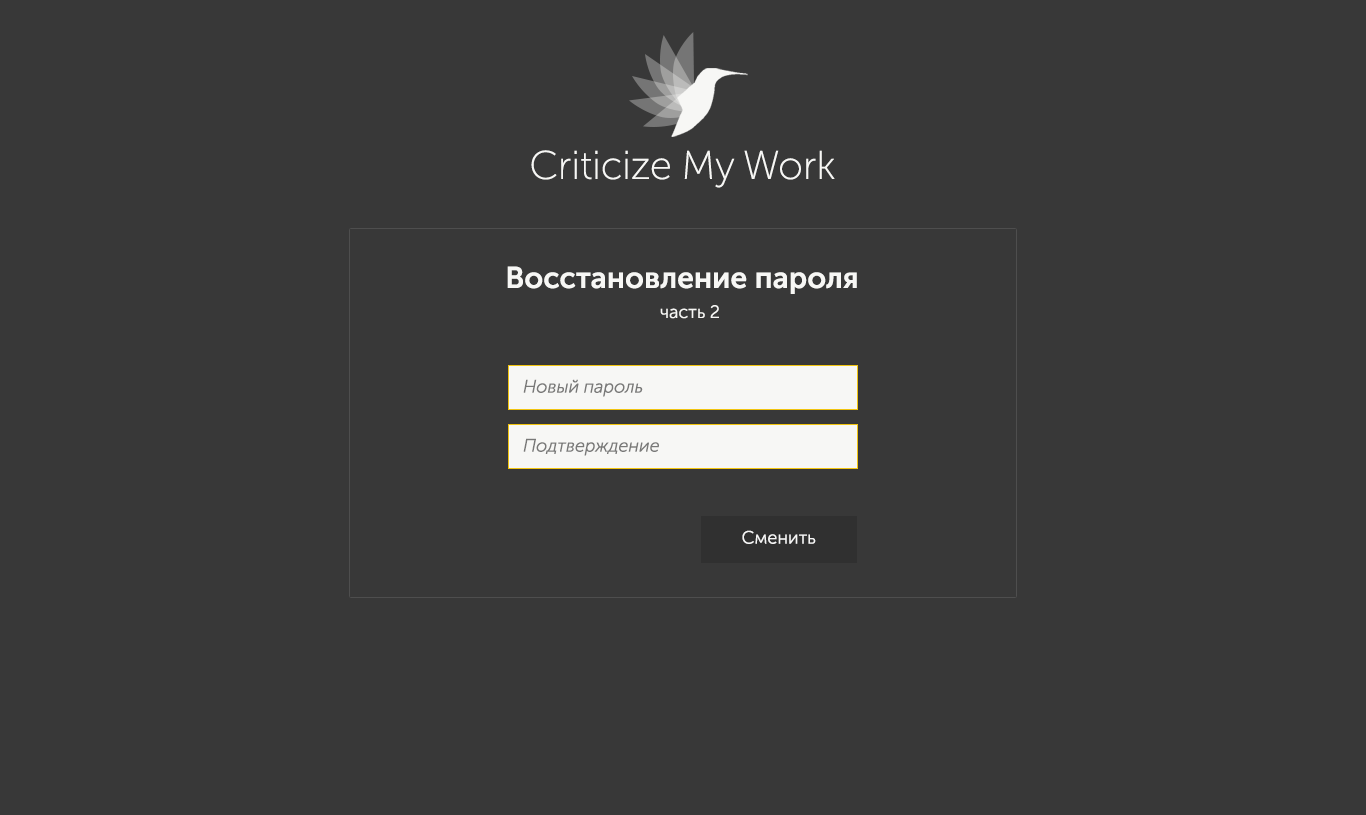
<style>
.page{position:relative;width:1366px;height:815px;background:#383838}
.page>*{position:absolute;margin:0}
.t1{font:40px "MuseoSansCyrl-100";color:#f7f7f5}
.t2{font:30px "MuseoSansCyrl-700";color:#f7f7f5}
.t3{font:18px "MuseoSansCyrl-300";color:#f7f7f5}
.t4{font:18px "MuseoSansCyrl-300Italic";color:#797978}
.t5{font:18px "MuseoSansCyrl-300";color:#f6f6f6}
</style>
<div class="page">
<p class="t1" style="left:531px;top:150px;width:304px;height:38px">Criticize My Work</p>
<p class="t2" style="left:507px;top:266px;width:350px;height:28px">Восстановление пароля</p>
<p class="t3" style="left:660px;top:305px;width:59px;height:14px">часть 2</p>
<p class="t4" style="left:523px;top:379px;width:120px;height:18px">Новый пароль</p>
<p class="t4" style="left:523px;top:438px;width:136px;height:18px">Подтверждение</p>
<p class="t5" style="left:742px;top:530px;width:74px;height:14px">Сменить</p>
</div>
